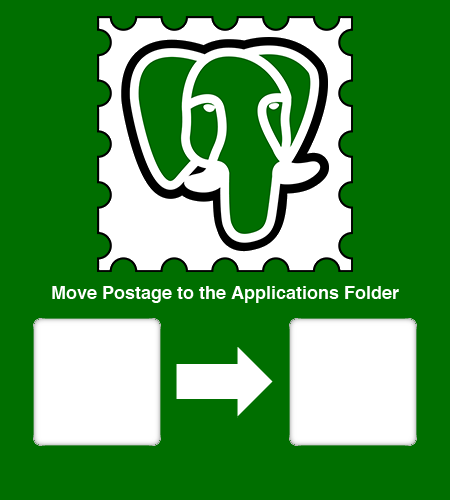
<style>
.page{position:relative;width:450px;height:500px;background:#006f00}
.page>*{position:absolute;margin:0}
.t1{font:18px "Helvetica-Bold";color:#ffffff}
</style>
<div class="page">
<p class="t1" style="left:52px;top:286px;width:347px;height:17px">Move Postage to the Applications Folder</p>
</div>
